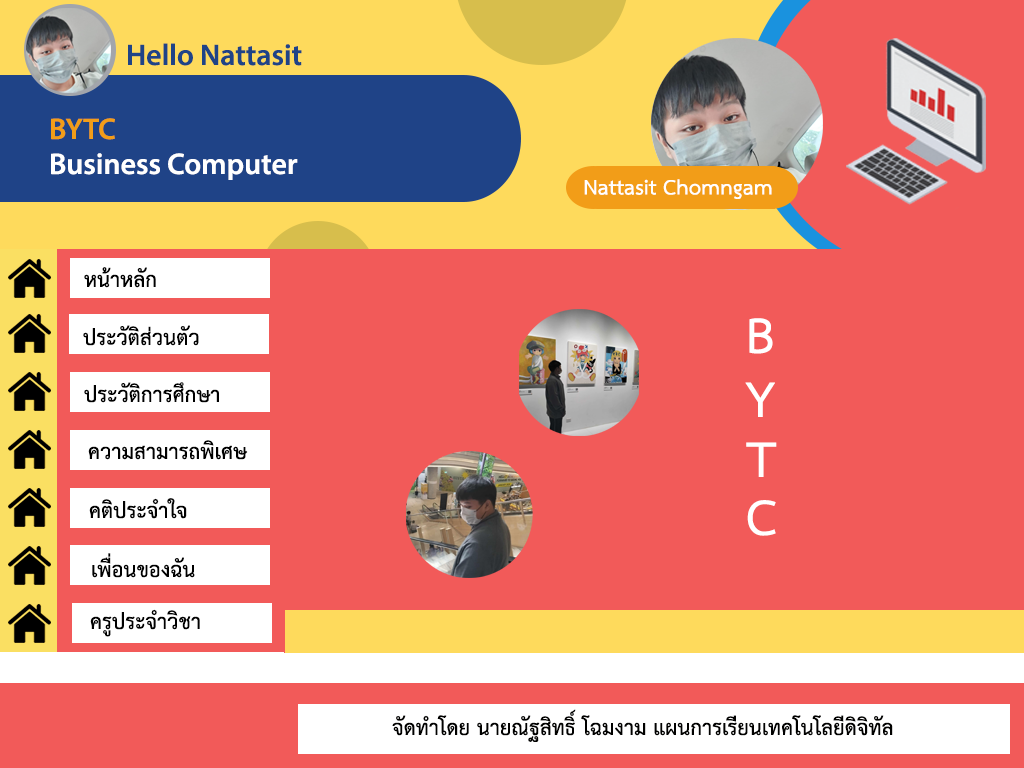
<style>
.page{position:relative;width:1024px;height:768px;background:#f25a59}
.page>*{position:absolute;margin:0}
.t1{font:30px "MyriadPro-Semibold";color:#1f4387}
.t2{font:30px "MyriadPro-Semibold";color:#f29d18}
.t3{font:30px "MyriadPro-Semibold";color:#ffffff}
.t4{font:30px "THSarabunITù-Bold";color:#ffffff}
.t5{font:30px "THSarabunITù-Bold";color:#000000}
.t6{font:72px "THSarabunITù-Bold";color:#ffffff}
.t7{font:30px "THSarabunITù-Bold";color:#010100}
</style>
<div class="page">
<p class="t1" style="left:128px;top:43px;width:174px;height:23px">Hello Nattasit</p>
<p class="t2" style="left:51px;top:118px;width:64px;height:22px">BYTC</p>
<p class="t3" style="left:51px;top:153px;width:247px;height:27px">Business Computer</p>
<p class="t4" style="left:584px;top:179px;width:188px;height:20px">Nattasit Chomngam</p>
<p class="t5" style="left:84px;top:267px;width:72px;height:21px">หน้าหลัก</p>
<p class="t6" style="left:749px;top:318px;width:24px;height:36px">B</p>
<p class="t5" style="left:83px;top:325px;width:116px;height:21px">ประวัติส่วนตัว</p>
<p class="t5" style="left:84px;top:382px;width:135px;height:21px">ประวัติการศึกษา</p>
<p class="t6" style="left:745px;top:382px;width:30px;height:35px">Y</p>
<p class="t5" style="left:88px;top:440px;width:160px;height:20px">ความสามารถพิเศษ</p>
<p class="t6" style="left:746px;top:442px;width:31px;height:35px">T</p>
<p class="t5" style="left:89px;top:498px;width:98px;height:21px">คติประจำใจ</p>
<p class="t6" style="left:747px;top:500px;width:29px;height:36px">C</p>
<p class="t5" style="left:92px;top:553px;width:103px;height:25px">เพื่อนของฉัน</p>
<p class="t5" style="left:90px;top:609px;width:110px;height:28px">ครูประจำวิชา</p>
<p class="t7" style="left:392px;top:709px;width:501px;height:33px">จัดทำโดย นายณัฐสิทธิ์ โฉมงาม แผนการเรียนเทคโนโลยีดิจิทัล</p>
</div>
